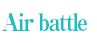
<style>
.page{position:relative;width:97px;height:43px;background:#ffffff}
.page>*{position:absolute;margin:0}
.t1{font:24px "RyuminPro-ExBold";letter-spacing:-0.08em;color:#1dbcc0;scale:0.9 1}
</style>
<div class="page">
<p class="t1" style="left:2px;top:13px;width:85px;height:18px">Air battle</p>
</div>
